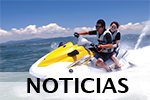
<style>
.page{position:relative;width:150px;height:100px}
.page>*{position:absolute;margin:0}
.t1{font:20.8px "LucidaSans-Demi";color:#000000}
</style>
<div class="page">
<p class="t1" style="left:27px;top:78px;width:102px;height:15px">NOTICIAS</p>
</div>
